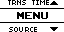
<style>
.page{position:relative;width:64px;height:32px;background:#ffffff}
.page>*{position:absolute;margin:0}
.t1{font:8px "04b03";color:#000000;scale:1.06 1}
.t2{font:14px "ArcadeClassic";color:#000000;scale:1.05 1}
</style>
<div class="page">
<p class="t1" style="left:8px;top:0px;width:41px;height:5px">TRNS TIME</p>
<p class="t2" style="left:17px;top:12px;width:31px;height:7px">MENU</p>
<p class="t1" style="left:9px;top:27px;width:28px;height:5px">SOURCE</p>
</div>
